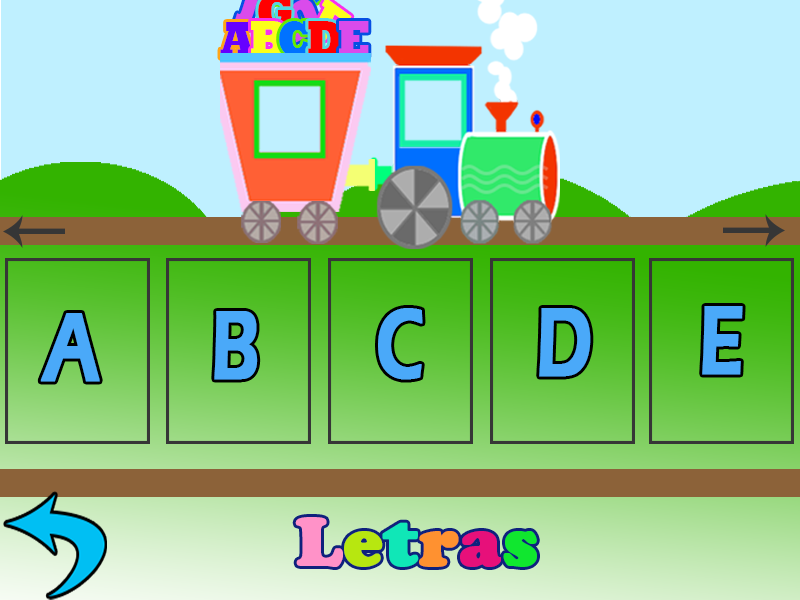
<style>
.page{position:relative;width:800px;height:600px;background:#bff0ff}
.page>*{position:absolute;margin:0}
.t1{font:12.8px/60.6px "Rockwell-ExtraBold";letter-spacing:-0.05em;color:#6600ff;scale:0.84 1}
.t2{font:12.8px/60.6px "Rockwell-ExtraBold";letter-spacing:-0.05em;color:#fcff1a;scale:0.84 1}
.t3{font:12.8px/60.6px "Rockwell-ExtraBold";letter-spacing:-0.05em;color:#0072ff;scale:0.84 1}
.t4{font:12.8px/60.6px "Rockwell-ExtraBold";letter-spacing:-0.05em;color:#ff0000;scale:0.84 1}
.t5{font:12.8px/60.6px "Rockwell-ExtraBold";letter-spacing:-0.05em;color:#da4beb;scale:0.84 1}
.t6{font:101.3px "ErasITC-Demi";letter-spacing:-0.01em;color:#4aa9f9;font-weight:bold;scale:0.73 1}
.t7{font:66.4px "CooperBlackStd";color:#ff92c8;font-weight:bold;scale:1.04 1}
.t8{font:66.4px "CooperBlackStd";color:#b7e710;font-weight:bold;scale:1.04 1}
.t9{font:66.4px "CooperBlackStd";color:#10e7b7;font-weight:bold;scale:1.04 1}
.t10{font:66.4px "CooperBlackStd";color:#ff9130;font-weight:bold;scale:1.04 1}
.t11{font:66.4px "CooperBlackStd";color:#e7107a;font-weight:bold;scale:1.04 1}
.t12{font:66.4px "CooperBlackStd";color:#10e72f;font-weight:bold;scale:1.04 1}
</style>
<div class="page">
<p class="t1" style="left:220px;top:22px;width:34px;height:36px">A</p>
<p class="t2" style="left:251px;top:21px;width:35px;height:36px">B</p>
<p class="t3" style="left:279px;top:21px;width:33px;height:36px">C</p>
<p class="t4" style="left:308px;top:21px;width:36px;height:36px">D</p>
<p class="t5" style="left:339px;top:21px;width:30px;height:36px">E</p>
<p class="t6" style="left:40px;top:313px;width:60px;height:69px">A</p>
<p class="t6" style="left:214px;top:311px;width:44px;height:69px">B</p>
<p class="t6" style="left:378px;top:308px;width:45px;height:72px">C</p>
<p class="t6" style="left:539px;top:308px;width:52px;height:69px">D</p>
<p class="t6" style="left:702px;top:306px;width:41px;height:69px">E</p>
<p class="t7" style="left:295px;top:517px;width:242px;height:50px">L<span class="t8">e</span><span class="t9">t</span><span class="t10">r</span><span class="t11">a</span><span class="t12">s</span></p>
</div>
